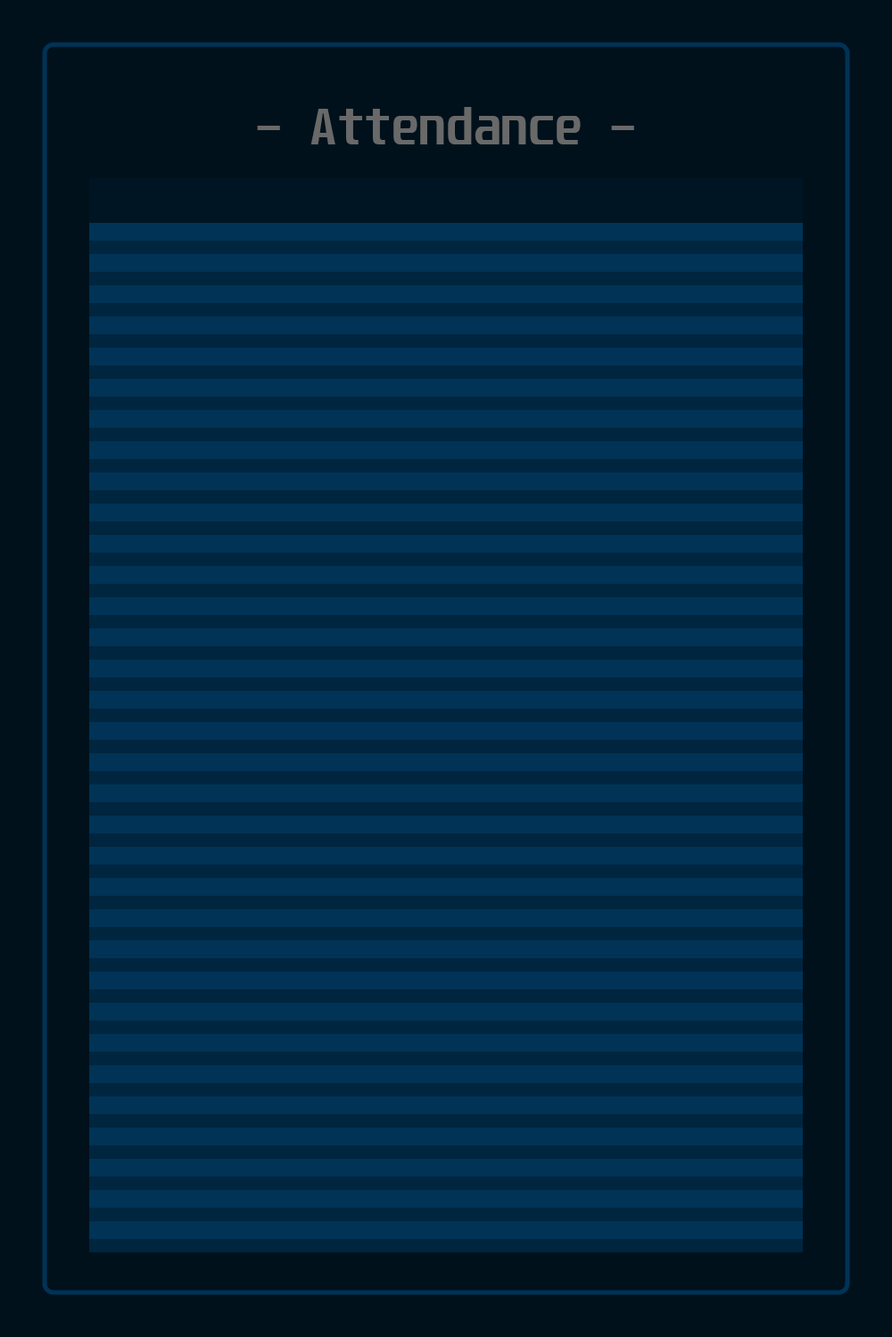
<style>
.page{position:relative;width:892px;height:1337px;background:#00111c}
.page>*{position:absolute;margin:0}
.t1{font:44.6px "Unispace-Bold";color:#696969}
</style>
<div class="page">
<p class="t1" style="left:257px;top:107px;width:377px;height:37px">- Attendance -</p>
</div>
